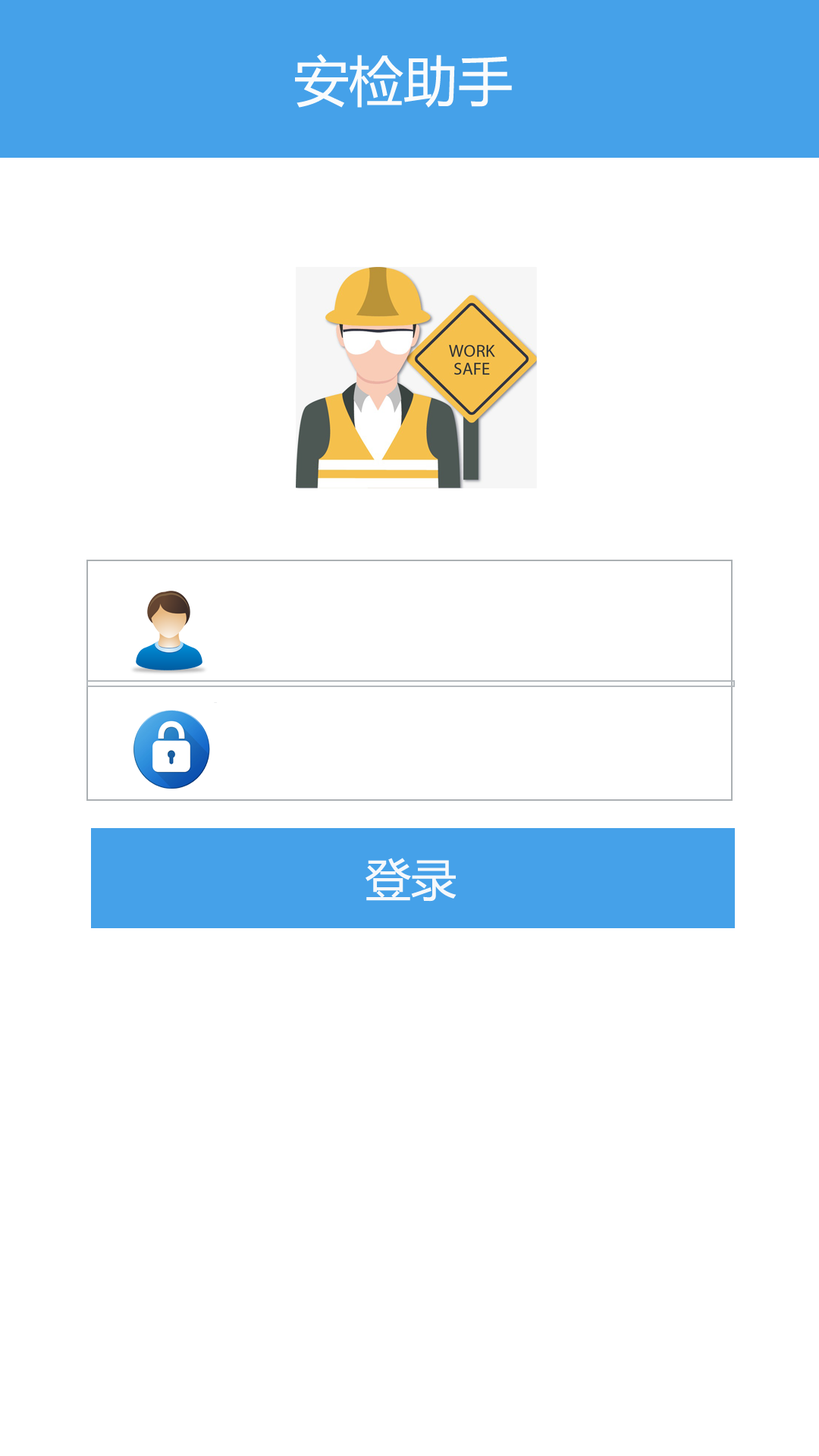
<style>
.page{position:relative;width:819px;height:1456px;background:#ffffff}
.page>*{position:absolute;margin:0}
.t1{font:54.6px "MicrosoftYaHei";color:#fafbfc}
.t2{font:45.5px "MicrosoftYaHei";color:#f5f8fb}
</style>
<div class="page">
<p class="t1" style="left:295px;top:54px;width:217px;height:54px">安检助手</p>
<p class="t2" style="left:366px;top:858px;width:91px;height:44px">登录</p>
</div>
